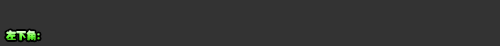
<style>
.page{position:relative;width:500px;height:46px;background:#333333}
.page>*{position:absolute;margin:0}
.t1{font:10px "Tensentype-JinZhuanHeiJ"}
</style>
<div class="page">
<p class="t1" style="left:6px;top:30px;width:34px;height:11px">左下角：</p>
</div>
